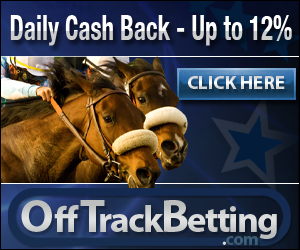
<style>
.page{position:relative;width:300px;height:250px}
.page>*{position:absolute;margin:0}
.t1{font:34.5px "HelveticaNeue-CondensedBold";scale:0.72 1}
.t2{font:19px "MyriadPro-Bold";color:#dbdbdb}
.t3{font:37.2px "MyriadPro-Bold";letter-spacing:-0.05em;color:#e0e2e2}
.t4{font:46.5px "MyriadPro-Bold";color:#e0e2e2}
.t5{font:37.2px "MyriadPro-Bold";letter-spacing:0.05em;color:#e0e2e2}
.t6{font:46.5px "MyriadPro-Bold";letter-spacing:-0.15em;color:#e0e2e2}
.t7{font:46.5px "MyriadPro-Bold";letter-spacing:-0.05em;color:#e0e2e2}
.t8{font:18.3px "MyriadPro-Bold";letter-spacing:-0.05em;color:#3e647e}
.t9{font:18.3px "MyriadPro-Bold";letter-spacing:-0.05em;color:#ffffff}
</style>
<div class="page">
<p class="t1" style="left:10px;top:15px;width:282px;height:31px">Daily Cash Back - Up to 12%</p>
<p class="t2" style="left:187px;top:73px;width:98px;height:21px">CLICK HERE</p>
<p class="t3" style="left:20px;top:193px;width:257px;height:50px"><span class="t4">O</span><span class="t5">ff</span><span class="t6">T</span>rack<span class="t7">B</span>etting</p>
<p class="t8" style="left:222px;top:230px;width:36px;height:20px"><span class="t9">.</span>com</p>
</div>
